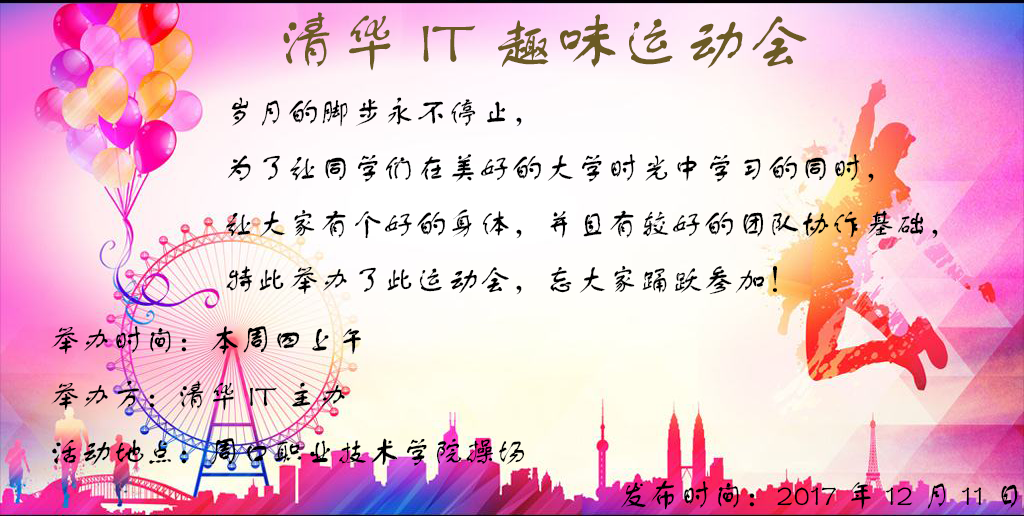
<style>
.page{position:relative;width:1024px;height:516px}
.page>*{position:absolute;margin:0}
.t1{font:64px "FZSTK--GBK1-0";color:#6b5a24}
.t2{font:12px "STXingkai";color:#000000}
.t3{font:32px "FZSTK--GBK1-0";color:#000000}
</style>
<div class="page">
<p class="t1" style="left:283px;top:12px;width:524px;height:59px"><span class="t2"> </span>清华IT趣味运动会</p>
<p class="t3" style="left:226px;top:97px;width:712px;height:198px">岁月的脚步永不停止，<br>为了让同学们在美好的大学时光中学习的同时，<br>让大家有个好的身体，并且有较好的团队协作基础，<br>特此举办了此运动会，忘大家踊跃参加！</p>
<p class="t3" style="left:51px;top:326px;width:474px;height:140px">举办时间：本周四上午<br>举办方：清华IT主办<br>活动地点：周口职业技术学院操场</p>
<p class="t3" style="left:621px;top:480px;width:397px;height:30px">发布时间：2017年12月11日</p>
</div>
